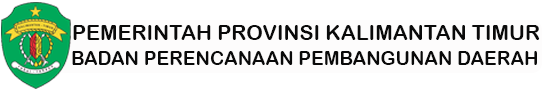
<style>
.page{position:relative;width:542px;height:100px;background:#ffffff}
.page>*{position:absolute;margin:0}
.t1{font:21px "ArialRoundedMTBold";color:#0a0a0a}
.t2{font:19px "ArialRoundedMTBold";color:#0a0a0a}
</style>
<div class="page">
<p class="t1" style="left:73px;top:25px;width:467px;height:15px">PEMERINTAH PROVINSI KALIMANTAN TIMUR</p>
<p class="t2" style="left:72px;top:51px;width:465px;height:14px">BADAN PERENCANAAN PEMBANGUNAN DAERAH</p>
</div>
